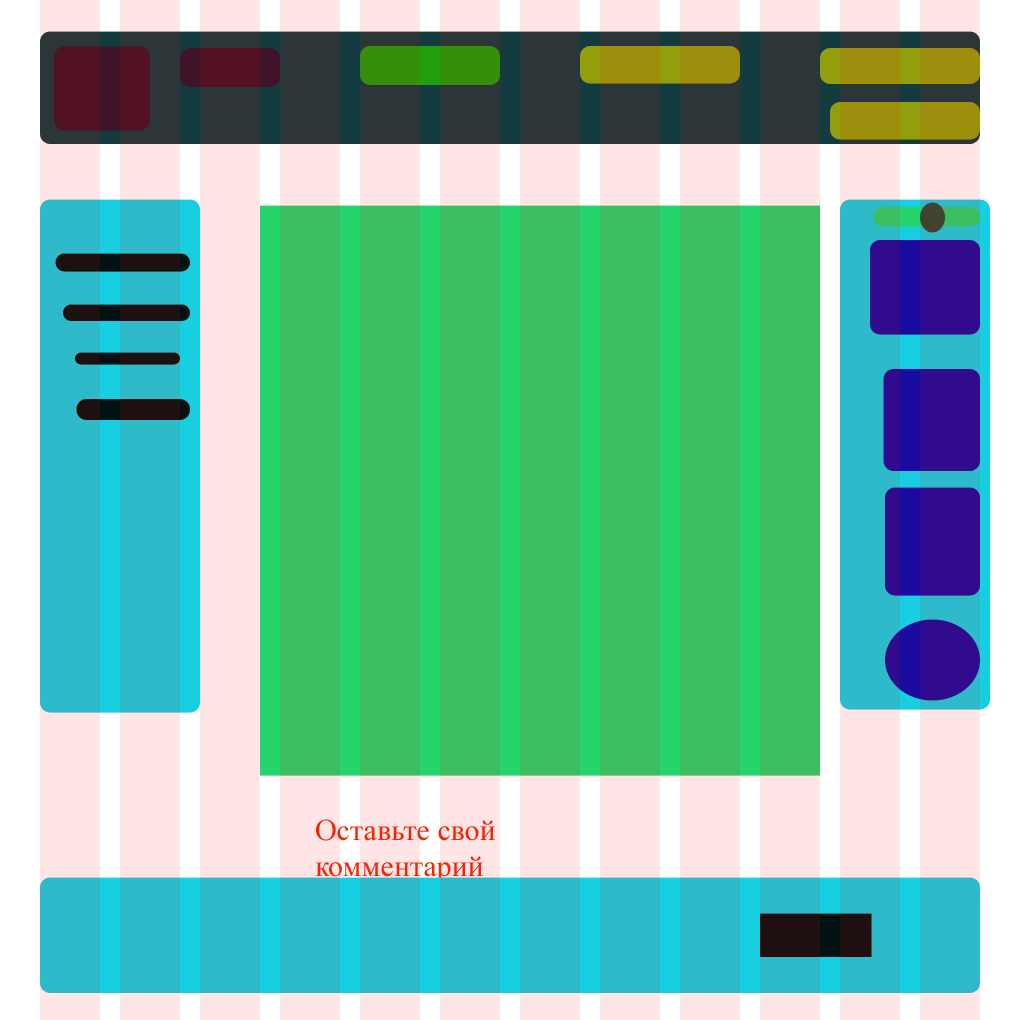
<style>
.page{position:relative;width:1020px;height:1020px}
.page>*{position:absolute;margin:0}
.t1{font:30px "TimesNewRomanPSMT";color:#f52806}
</style>
<div class="page">
<p class="t1" style="left:315px;top:819px;width:180px;height:64px">Оставьте свой комментарий</p>
</div>
